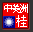
<style>
.page{position:relative;width:33px;height:32px;background:#f20000}
.page>*{position:absolute;margin:0}
.t1{font:10.4px "SimSun";letter-spacing:-0.25em;color:#ffffff}
.t2{font:11.7px "SimSun";color:#ffffff}
</style>
<div class="page">
<p class="t1" style="left:4px;top:4px;width:24px;height:9px">中美洲</p>
<p class="t2" style="left:16px;top:15px;width:11px;height:12px">桂</p>
</div>
